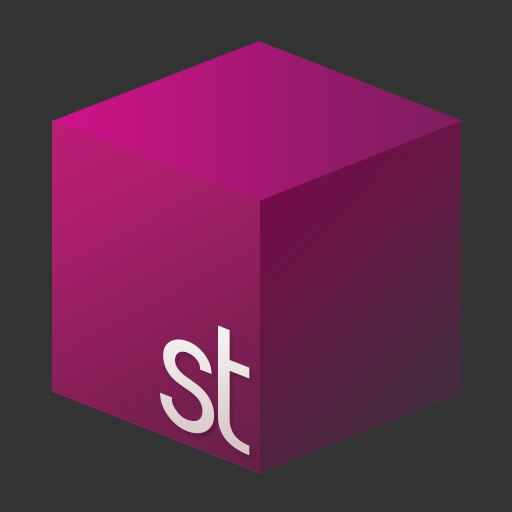
<style>
.page{position:relative;width:512px;height:512px;background:#333333}
.page>*{position:absolute;margin:0}
.t1{font:150px "AbeatbyKai";letter-spacing:-0.05em;color:#e7dedf;scale:1.07 1}
</style>
<div class="page">
<p class="t1" style="left:160px;top:325px;width:90px;height:131px;rotate:21deg">st</p>
</div>
